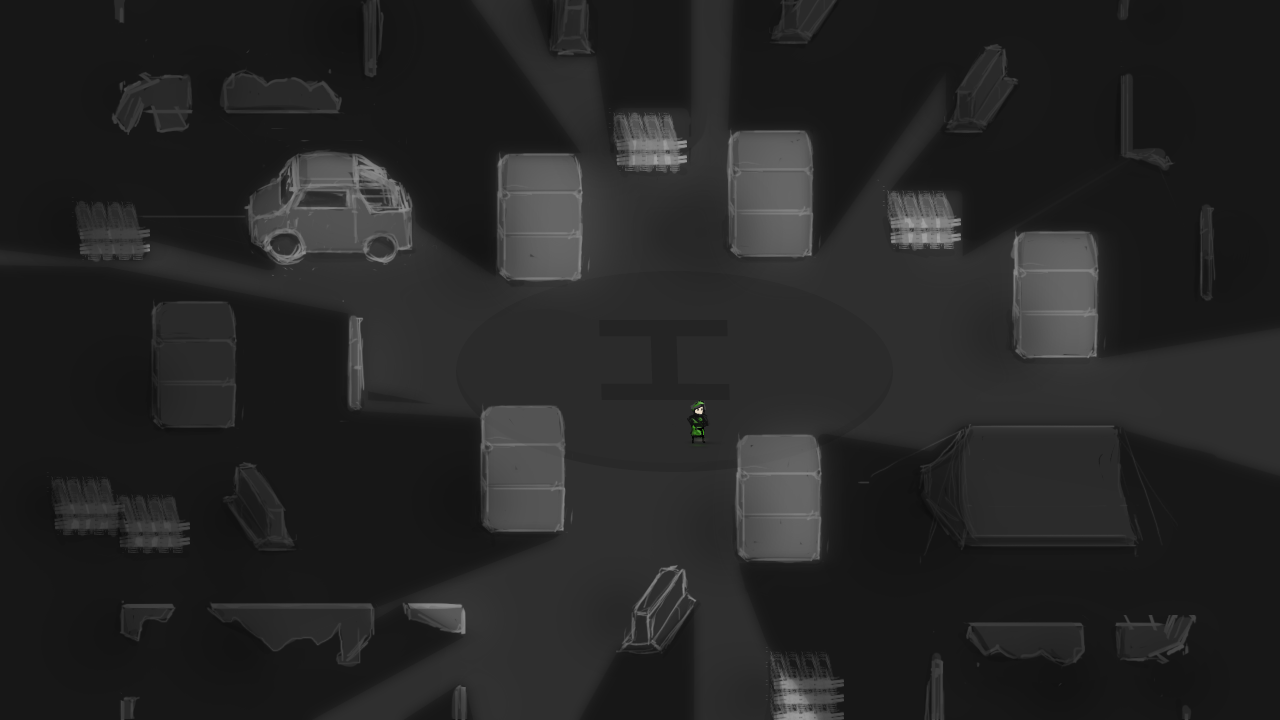
<style>
.page{position:relative;width:1280px;height:720px;background:#171717}
.page>*{position:absolute;margin:0}
.t1{font:255.5px "VisitorTT1BRK";letter-spacing:0.06em;color:#242424;scale:0.62 1}
</style>
<div class="page">
<p class="t1" style="left:599px;top:320px;width:131px;height:80px;rotate:88deg">H</p>
</div>
